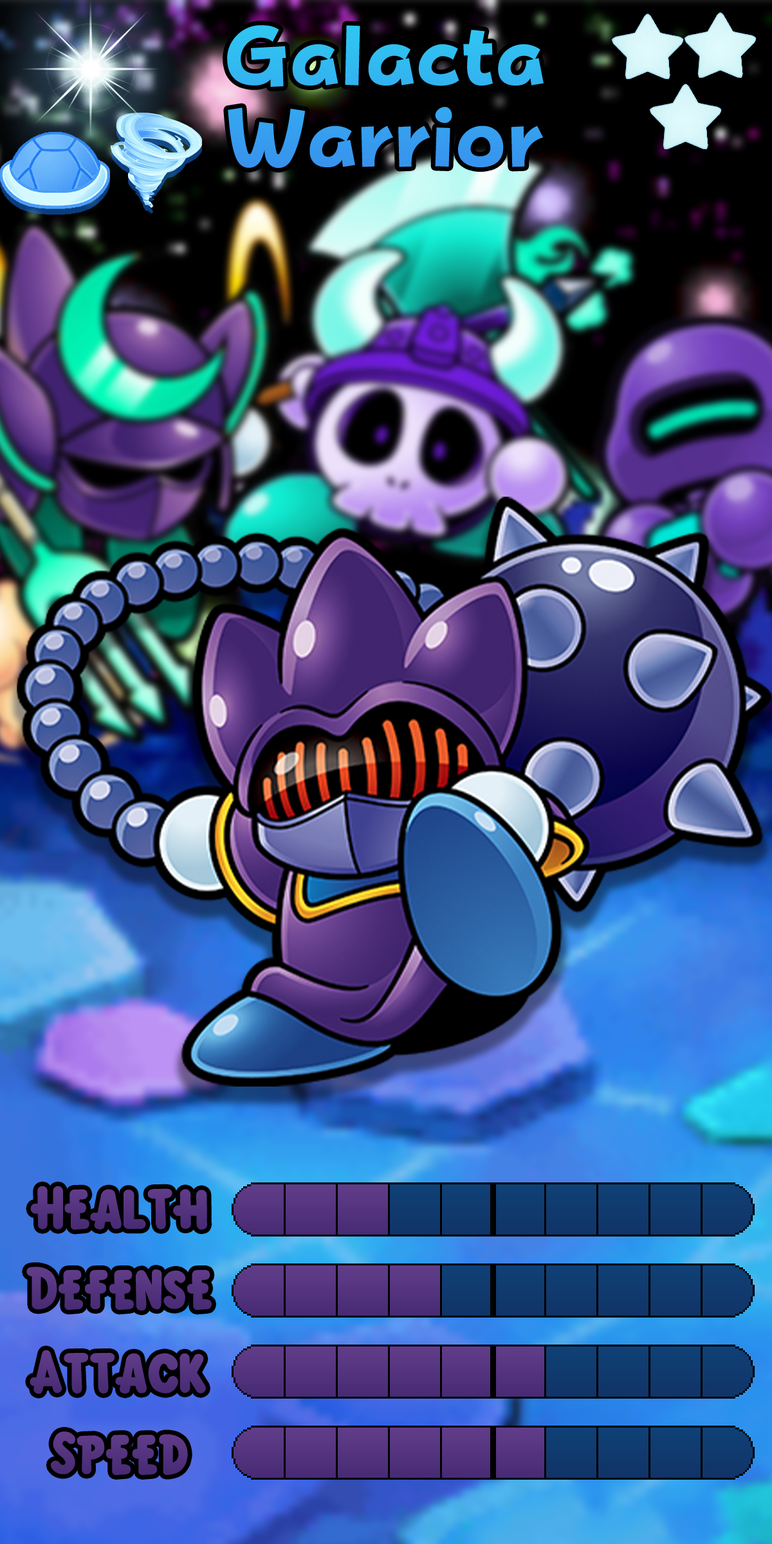
<style>
.page{position:relative;width:772px;height:1544px}
.page>*{position:absolute;margin:0}
.t1{font:142.2px/81.7px "FOTPopHappinessStrp-ExtraBold"}
.t2{font:92.7px "KirbyClassic";color:#53337e}
.t3{font:92px "KirbyClassic";color:#54347f}
.t4{font:92.7px "KirbyClassic";color:#55347f}
</style>
<div class="page">
<p class="t1" style="left:227px;top:25px;width:317px;height:143px;text-align:center">Galacta<br>Warrior</p>
<p class="t2" style="left:30px;top:1186px;width:178px;height:44px">Health</p>
<p class="t3" style="left:26px;top:1267px;width:186px;height:44px">Defense</p>
<p class="t2" style="left:30px;top:1350px;width:176px;height:44px">Attack</p>
<p class="t4" style="left:50px;top:1432px;width:138px;height:43px">Speed</p>
</div>
